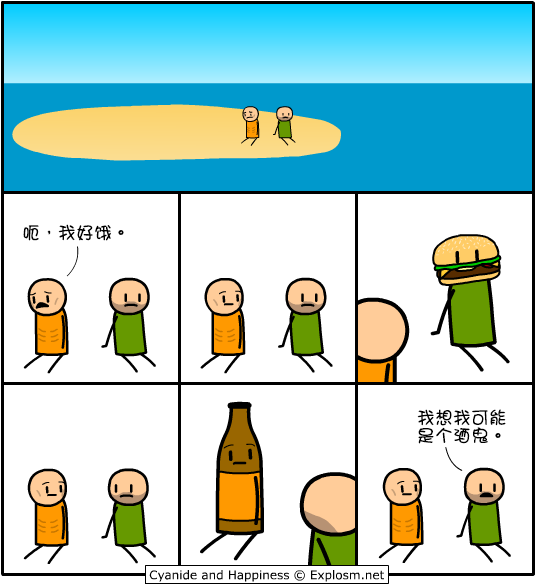
<style>
.page{position:relative;width:536px;height:585px;background:#ffffff}
.page>*{position:absolute;margin:0}
.t1{font:18px "DFGirl";color:#000000}
.t2{font:18px/18px "DFGirl";color:#000000}
</style>
<div class="page">
<p class="t1" style="left:23px;top:224px;width:101px;height:17px">呃，我好饿。</p>
<p class="t2" style="left:417px;top:409px;width:89px;height:35px">我想我可能<br>是个酒鬼。</p>
</div>
